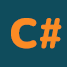
<style>
.page{position:relative;width:67px;height:67px;background:#0f4c5c}
.page>*{position:absolute;margin:0}
.t1{font:42px "Nunito-Black";color:#fb8b24;text-transform:uppercase}
</style>
<div class="page">
<p class="t1" style="left:11px;top:18px;width:51px;height:31px">C#</p>
</div>
